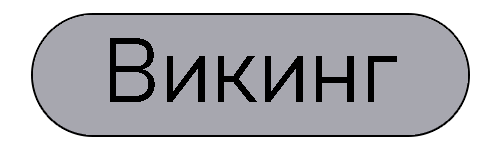
<style>
.page{position:relative;width:500px;height:150px;background:#a7a7af}
.page>*{position:absolute;margin:0}
.t1{font:90px "Bahnschrift-Bold";color:#000000}
</style>
<div class="page">
<p class="t1" style="left:110px;top:38px;width:287px;height:64px">Викинг</p>
</div>
